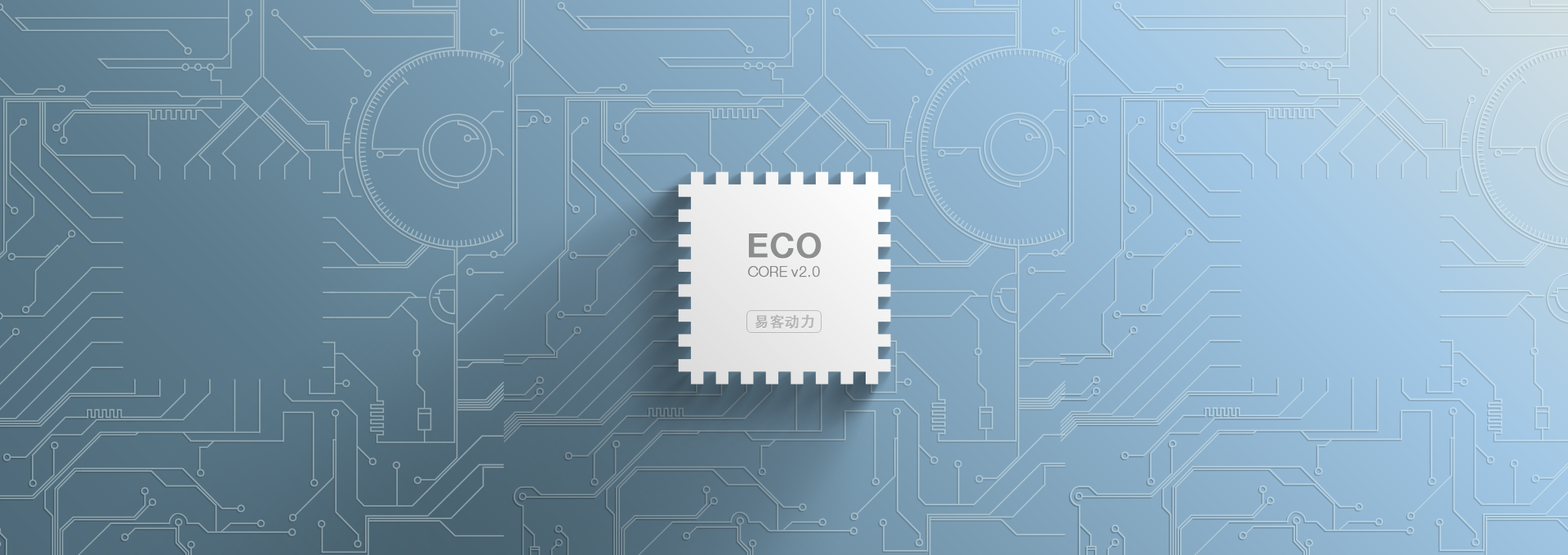
<style>
.page{position:relative;width:1568px;height:555px}
.page>*{position:absolute;margin:0}
.t1{font:13.9px/36.8px "HelveticaNeueLTPro-Th";letter-spacing:0.025em;color:#8d8e8f;font-weight:bold}
.t2{font:33.5px/36.8px "HelveticaNeueLTPro-Md";letter-spacing:0.025em;color:#8d8e8f;font-weight:bold}
.t3{font:14.7px "AdobeHeitiStd-Regular";letter-spacing:0.025em;color:#b5b6b6;font-weight:bold}
</style>
<div class="page">
<p class="t1" style="left:748px;top:233px;width:74px;height:45px;text-align:center"><span class="t2">ECO<br></span>CORE v2.0</p>
<p class="t3" style="left:755px;top:314px;width:59px;height:15px">易客动力</p>
</div>
